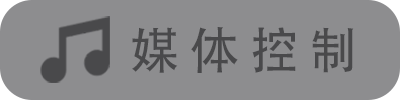
<style>
.page{position:relative;width:400px;height:100px;background:#8d8d8f}
.page>*{position:absolute;margin:0}
.t1{font:50px "AdobeHeitiStd-Regular";color:#49494b}
</style>
<div class="page">
<p class="t1" style="left:132px;top:27px;width:222px;height:46px">媒 体 控 制</p>
</div>
